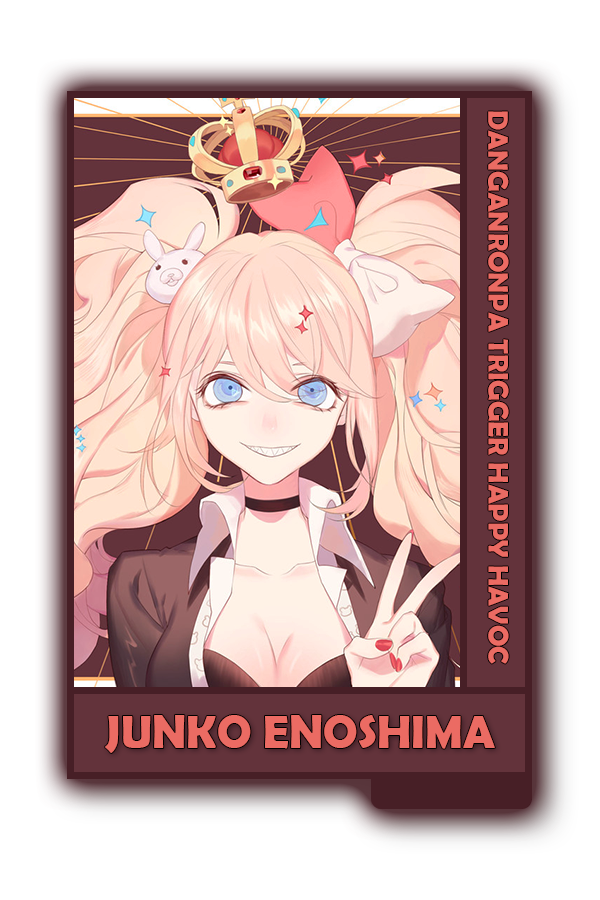
<style>
.page{position:relative;width:600px;height:900px;background:#ffffff}
.page>*{position:absolute;margin:0}
.t1{font:28.5px "BerlinSansFBDemi-Bold";color:#e77770}
.t2{font:46.1px "BerlinSansFBDemi-Bold";color:#e77770}
</style>
<div class="page">
<p class="t1" style="left:488px;top:111px;width:21px;height:553px;rotate:90deg">DANGANRONPA TRIGGER HAPPY HAVOC</p>
<p class="t2" style="left:105px;top:715px;width:390px;height:38px">JUNKO ENOSHIMA</p>
</div>
